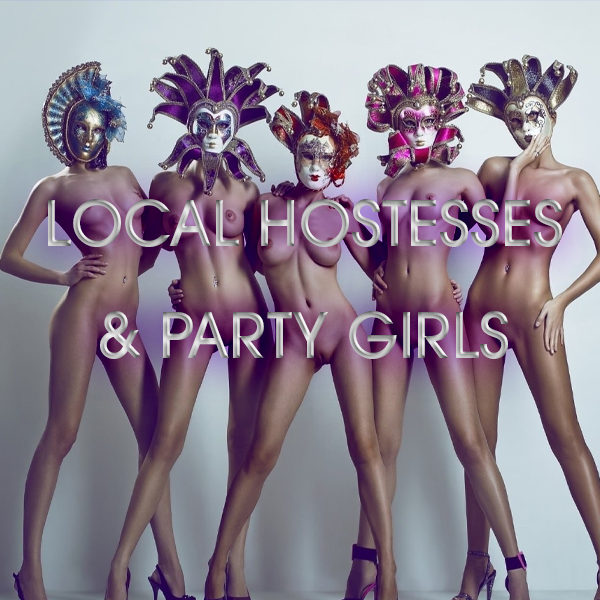
<style>
.page{position:relative;width:600px;height:600px}
.page>*{position:absolute;margin:0}
.t1{font:61.9px/112px "ITCAvantGardePro-Md";text-transform:uppercase}
</style>
<div class="page">
<p class="t1" style="left:48px;top:199px;width:514px;height:160px;text-align:center">LOCAL HOSTESSES<br>&amp; PARTY GIRLS</p>
</div>
